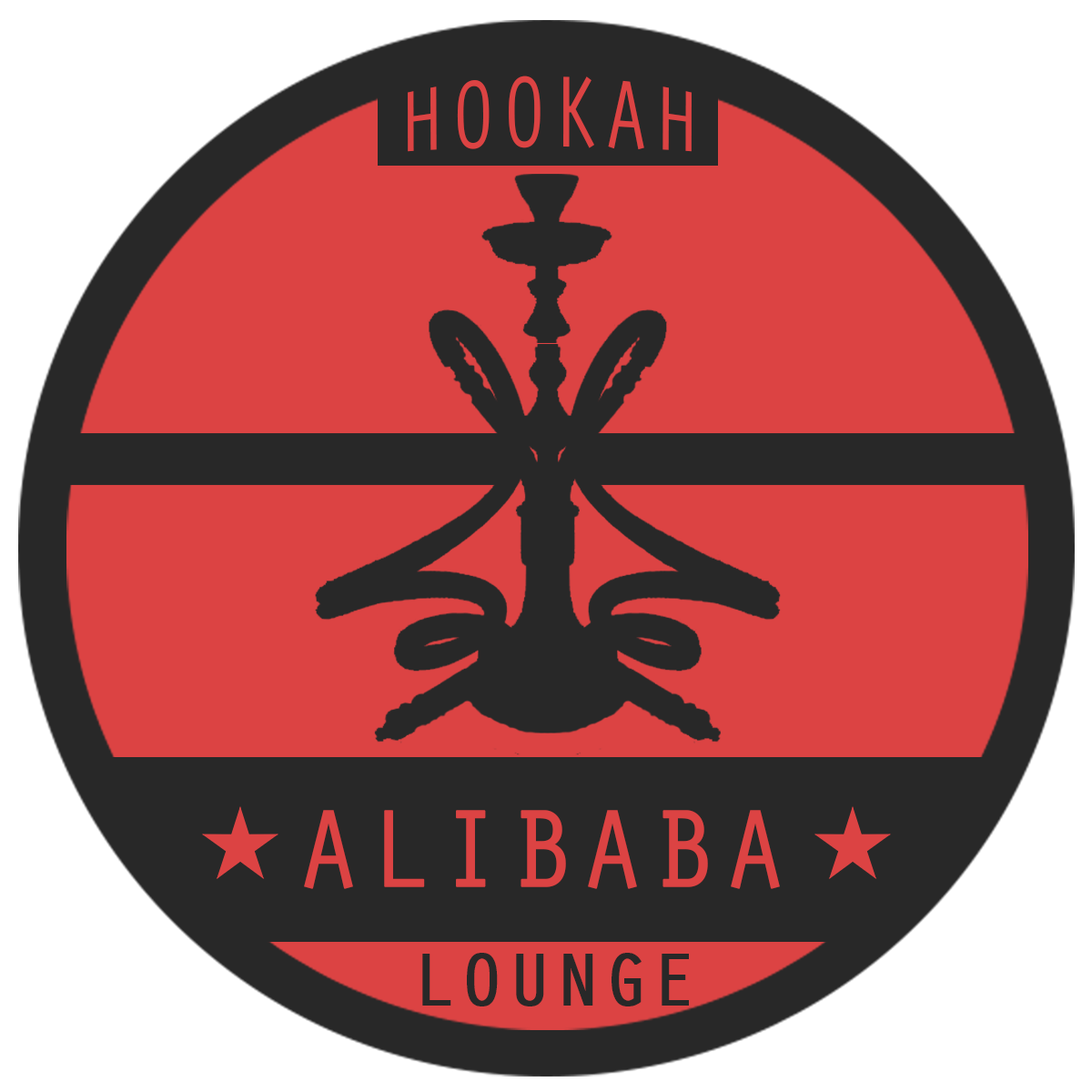
<style>
.page{position:relative;width:1092px;height:1092px;background:#dc4343}
.page>*{position:absolute;margin:0}
.t1{font:85.1px "OratorStd";color:#dc4343}
.t2{font:113.6px "OratorStd";color:#dc4343;font-weight:bold}
.t3{font:76.6px "OratorStd";color:#282828;font-weight:bold}
</style>
<div class="page">
<p class="t1" style="left:408px;top:76px;width:284px;height:76px">HOOKAH</p>
<p class="t2" style="left:304px;top:810px;width:476px;height:79px">ALIBABA</p>
<p class="t3" style="left:422px;top:953px;width:267px;height:53px">LOUNGE</p>
</div>
